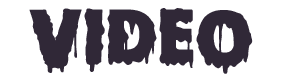
<style>
.page{position:relative;width:282px;height:82px;background:#ffffff}
.page>*{position:absolute;margin:0}
.t1{font:72px "ScaryHalloweenFont-Bold";color:#302837}
</style>
<div class="page">
<p class="t1" style="left:29px;top:8px;width:224px;height:66px">video</p>
</div>
